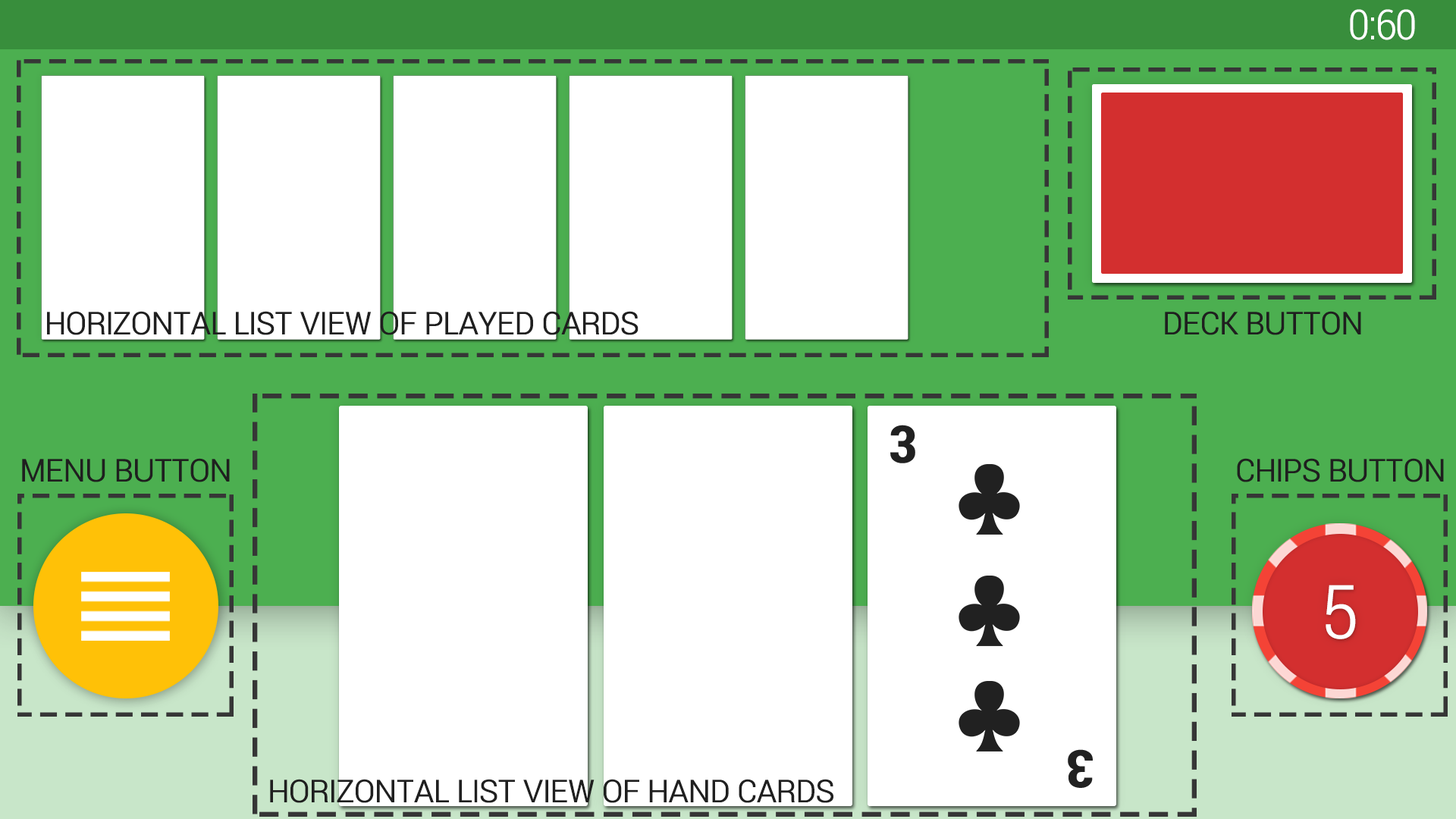
<style>
.page{position:relative;width:1456px;height:819px;background:#ffffff}
.page>*{position:absolute;margin:0}
.t1{font:41.2px "RobotoCondensed-Light";letter-spacing:-0.04em;color:#ffffff;font-variant:small-caps;scale:1.12 1}
.t2{font:39.5px "RobotoCondensed-Light";letter-spacing:-0.04em;color:#1f1f1f;font-variant:small-caps;scale:1.12 1}
.t3{font:74.4px "RobotoCondensed-Light";letter-spacing:-0.04em;color:#ffffff;font-variant:small-caps;scale:1.12 1}
</style>
<div class="page">
<p class="t1" style="left:1350px;top:9px;width:65px;height:31px">0:60</p>
<p class="t2" style="left:47px;top:311px;width:592px;height:24px">HORIZONTAL LIST VIEW of played cards</p>
<p class="t2" style="left:1165px;top:311px;width:196px;height:24px">Deck button</p>
<p class="t2" style="left:22px;top:458px;width:208px;height:24px">Menu button</p>
<p class="t2" style="left:1237px;top:458px;width:207px;height:24px">Chips button</p>
<p class="t3" style="left:1326px;top:585px;width:30px;height:54px">5</p>
<p class="t2" style="left:270px;top:779px;width:563px;height:24px">HORIZONTAL LIST VIEW of hand cards</p>
</div>
